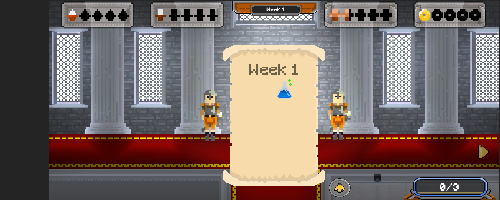
<style>
.page{position:relative;width:500px;height:200px}
.page>*{position:absolute;margin:0}
.t1{font:15.1px "Minecraft";letter-spacing:0.035em;color:#6c6048}
</style>
<div class="page">
<p class="t1" style="left:249px;top:64px;width:49px;height:11px">Week 1</p>
</div>
